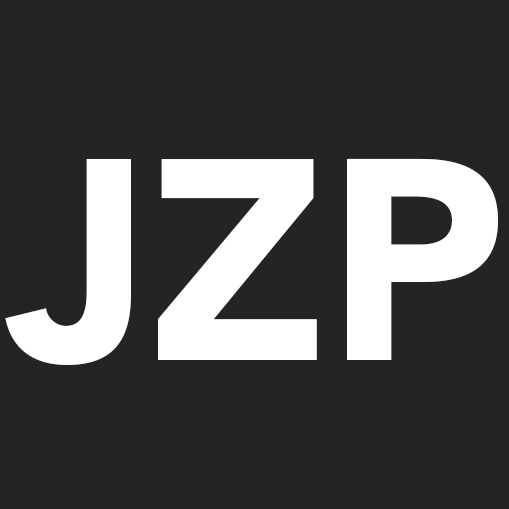
<style>
.page{position:relative;width:509px;height:509px;background:#242424}
.page>*{position:absolute;margin:0}
.t1{font:283.3px "AvenirLTStd-Black";color:#ffffff}
</style>
<div class="page">
<p class="t1" style="left:5px;top:158px;width:493px;height:207px">JZP</p>
</div>
